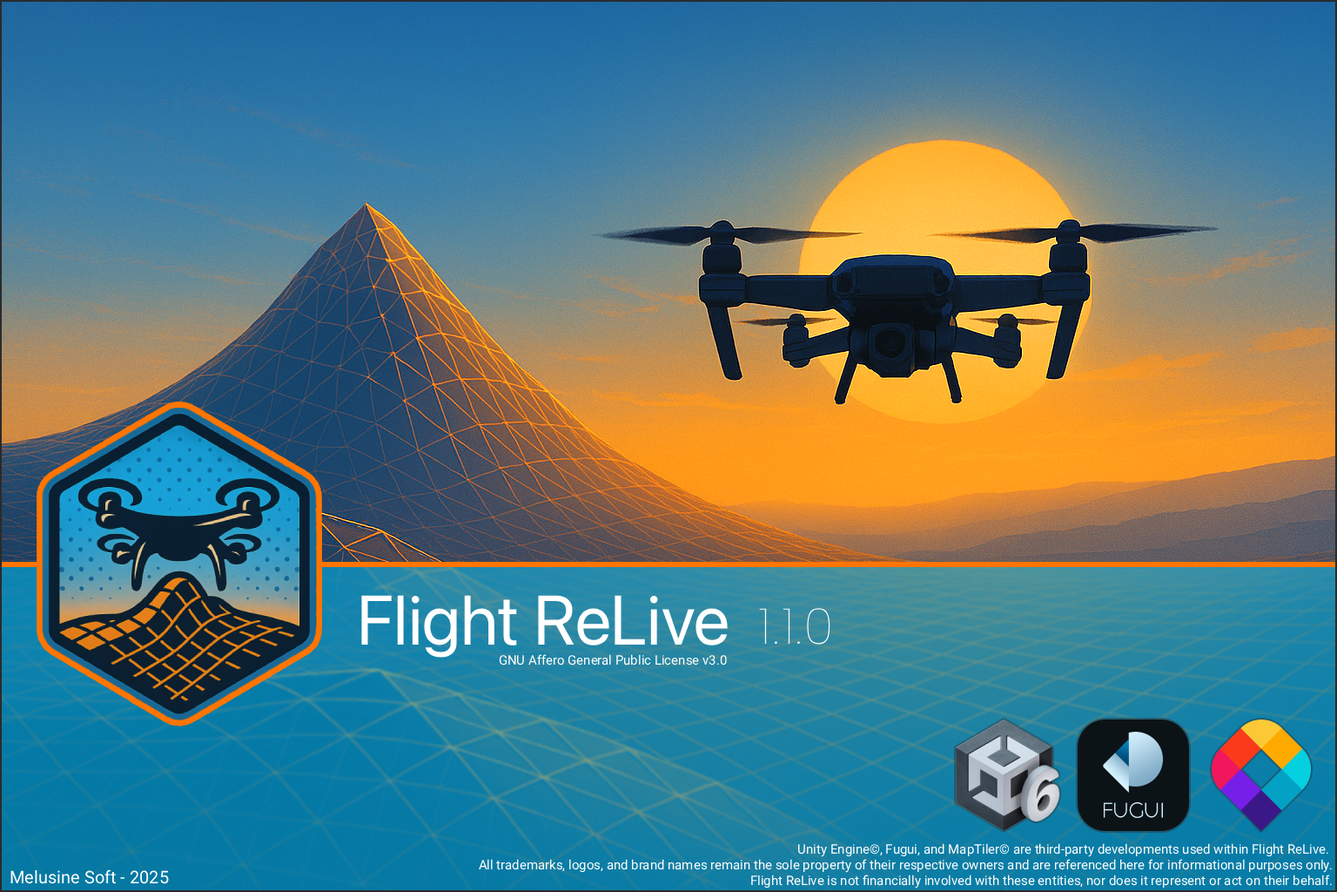
<style>
.page{position:relative;width:1337px;height:892px}
.page>*{position:absolute;margin:0}
.t1{font:69.7px "SFProDisplay-Regular";color:#ffffff}
.t2{font:50.1px "AlbertSans-Thin";color:#ffffff}
.t3{font:13.1px "SFProDisplay-Regular";color:#ffffff}
.t4{font:17.4px "SFProDisplay-Regular";color:#ffffff}
</style>
<div class="page">
<p class="t1" style="left:361px;top:595px;width:367px;height:62px">Flight ReLive</p>
<p class="t2" style="left:759px;top:608px;width:72px;height:36px">1.1.0</p>
<p class="t3" style="left:499px;top:654px;width:228px;height:11px">GNU Affero General Public License v3.0</p>
<p class="t3" style="left:479px;top:843px;width:853px;height:45px;text-align:right">Unity Engine©, Fugui, and MapTiler© are third-party developments used within Flight ReLive. <br>All trademarks, logos, and brand names remain the sole property of their respective owners and are referenced here for informational purposes only.<br>Flight ReLive is not financially involved with these entities, nor does it represent or act on their behalf.</p>
<p class="t4" style="left:10px;top:869px;width:159px;height:15px">Melusine Soft - 2025</p>
</div>
